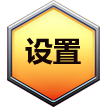
<style>
.page{position:relative;width:107px;height:107px;background:#ffffff}
.page>*{position:absolute;margin:0}
.t1{font:28px "MicrosoftYaHei";color:#150606}
</style>
<div class="page">
<p class="t1" style="left:25px;top:37px;width:56px;height:28px">设置</p>
</div>
